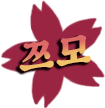
<style>
.page{position:relative;width:105px;height:108px;background:#ffffff}
.page>*{position:absolute;margin:0}
.t1{font:38.3px "SDKukdetopokki-bBd";letter-spacing:0.04em}
</style>
<div class="page">
<p class="t1" style="left:19px;top:35px;width:72px;height:37px;rotate:-8deg">쯔모</p>
</div>
